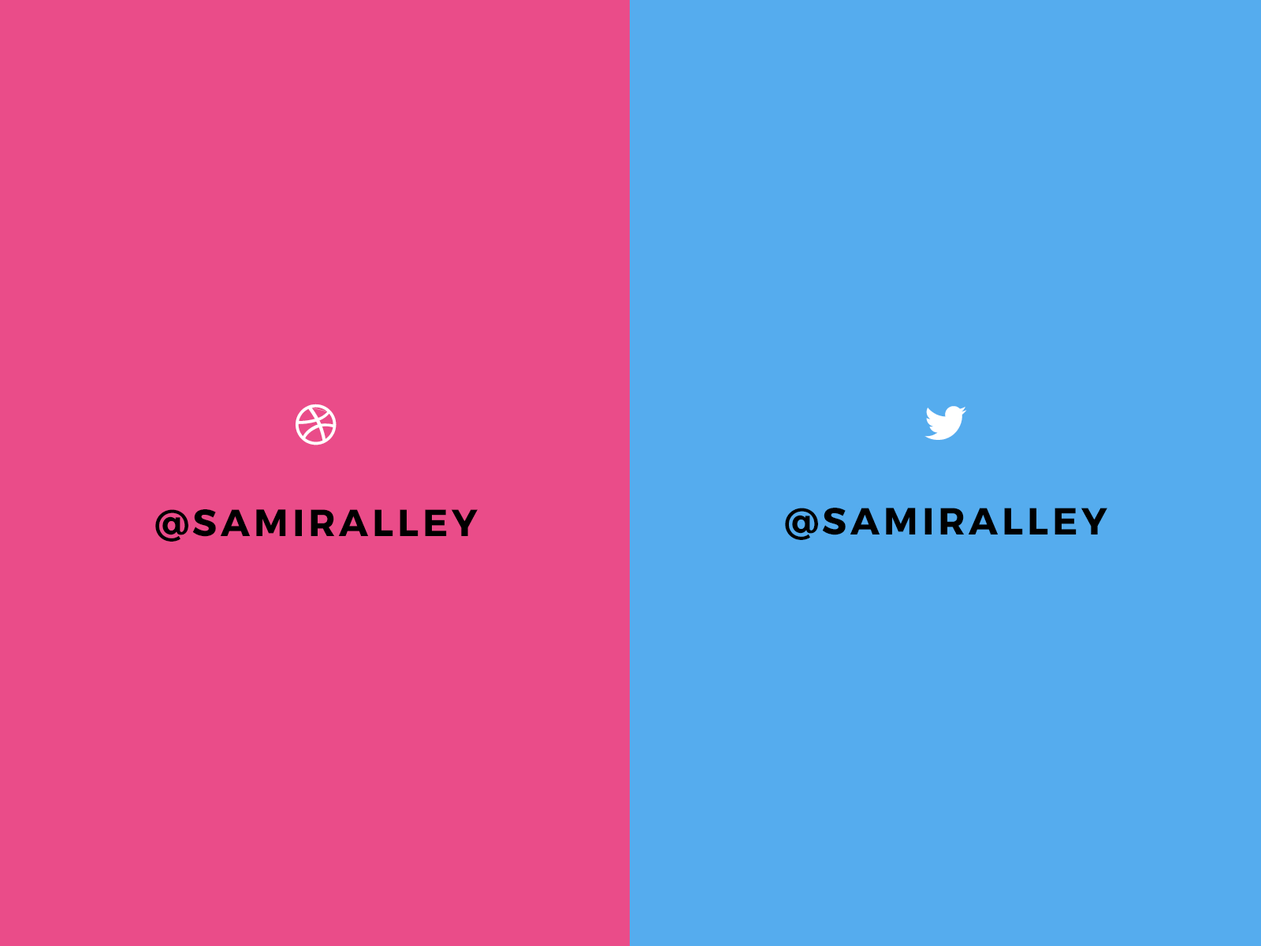
<style>
.page{position:relative;width:1261px;height:946px;background:#55acee}
.page>*{position:absolute;margin:0}
.t1{font:37.8px "Montserrat-Bold";letter-spacing:0.1em;color:#000000;text-transform:uppercase}
</style>
<div class="page">
<p class="t1" style="left:155px;top:509px;width:323px;height:32px">@samiralley</p>
<p class="t1" style="left:785px;top:508px;width:322px;height:32px">@samiralley</p>
</div>
